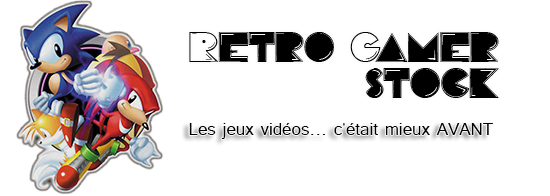
<style>
.page{position:relative;width:550px;height:196px;background:#ffffff}
.page>*{position:absolute;margin:0}
.t1{font:30px "PacFont";color:#000000}
.t2{font:21.7px "Tunga";color:#000000}
</style>
<div class="page">
<p class="t1" style="left:189px;top:32px;width:310px;height:66px">Retro Gamer <br>stock</p>
<p class="t2" style="left:189px;top:123px;width:304px;height:16px">Les jeux vidéos... c'était mieux AVANT</p>
</div>
